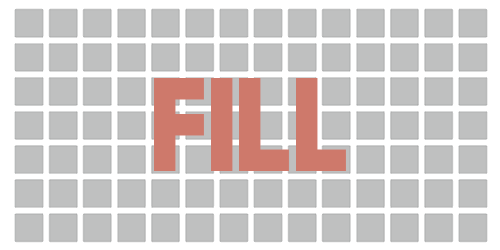
<style>
.page{position:relative;width:500px;height:250px;background:#bfc0c0}
.page>*{position:absolute;margin:0}
.t1{font:145.8px "FeedingaMoment";color:#ce796b}
</style>
<div class="page">
<p class="t1" style="left:154px;top:78px;width:192px;height:93px">FILL</p>
</div>
